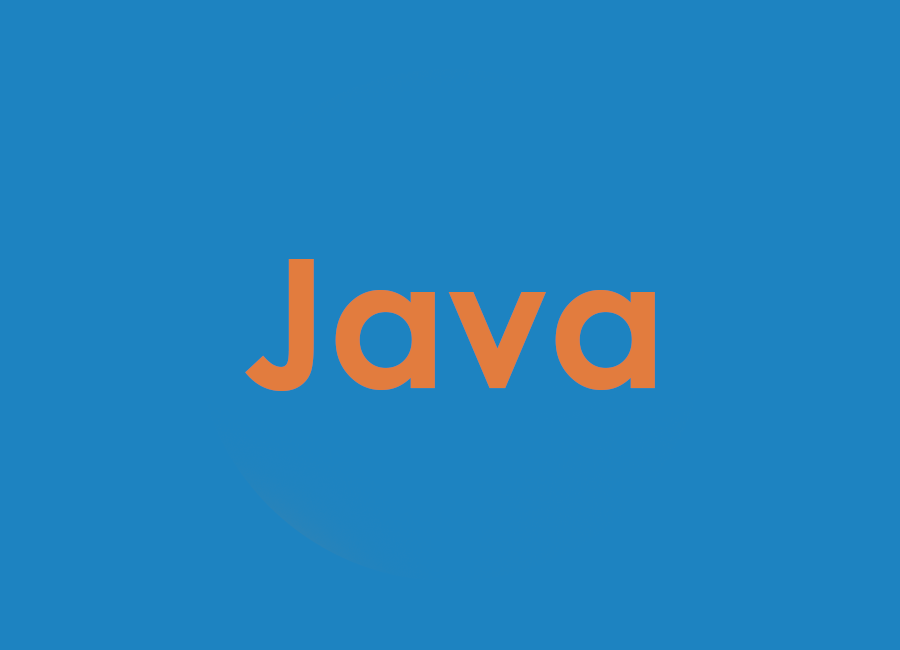
<style>
.page{position:relative;width:900px;height:650px;background:#1d83c1}
.page>*{position:absolute;margin:0}
.t1{font:180px "CenturyGothic-Bold";color:#e27c3e}
</style>
<div class="page">
<p class="t1" style="left:245px;top:259px;width:410px;height:132px">Java</p>
</div>
